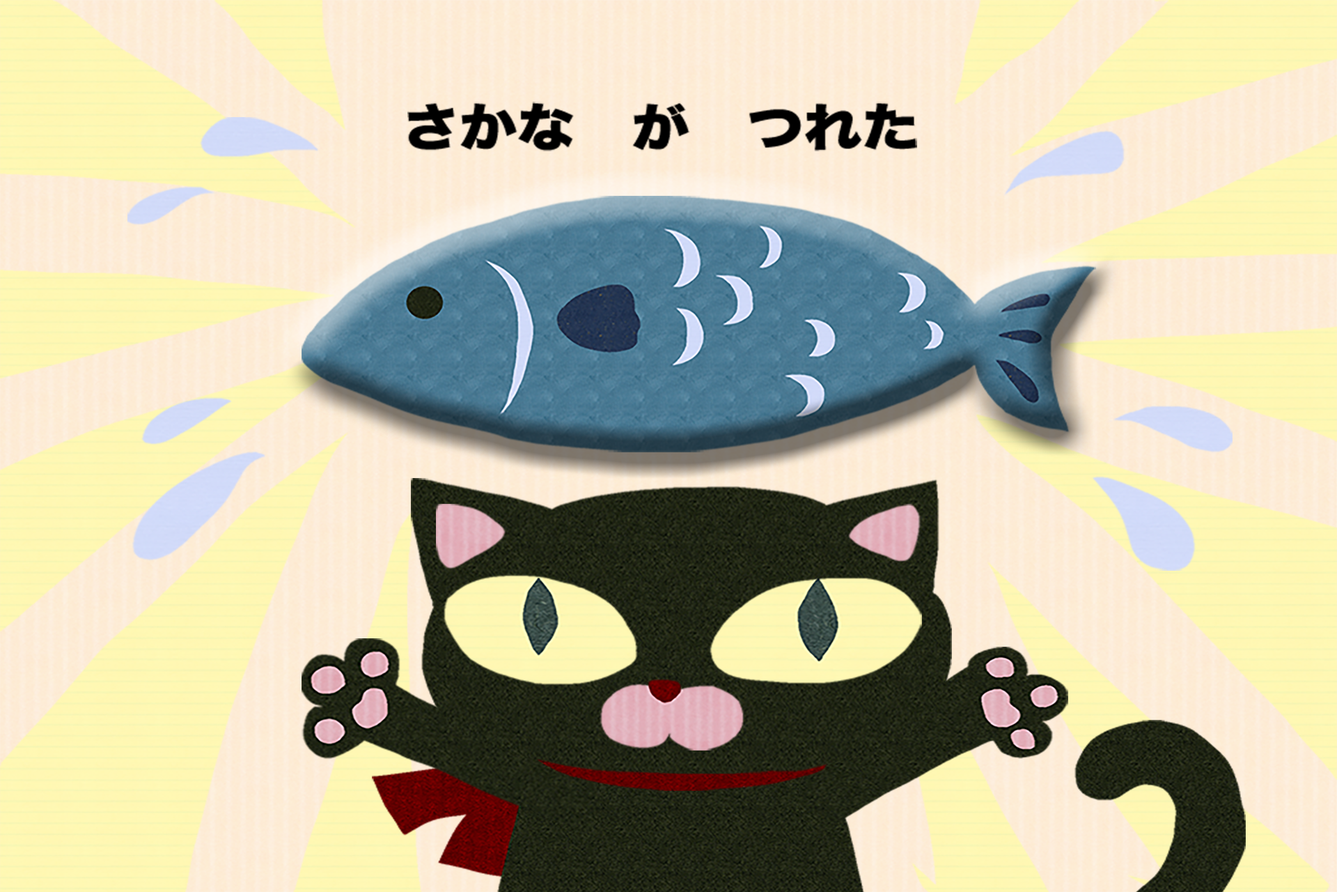
<style>
.page{position:relative;width:1337px;height:892px}
.page>*{position:absolute;margin:0}
.t1{font:51.1px "HiraKakuStd-W8";color:#000000;scale:1.12 1}
</style>
<div class="page">
<p class="t1" style="left:407px;top:102px;width:510px;height:49px">さかな　が　つれた</p>
</div>
